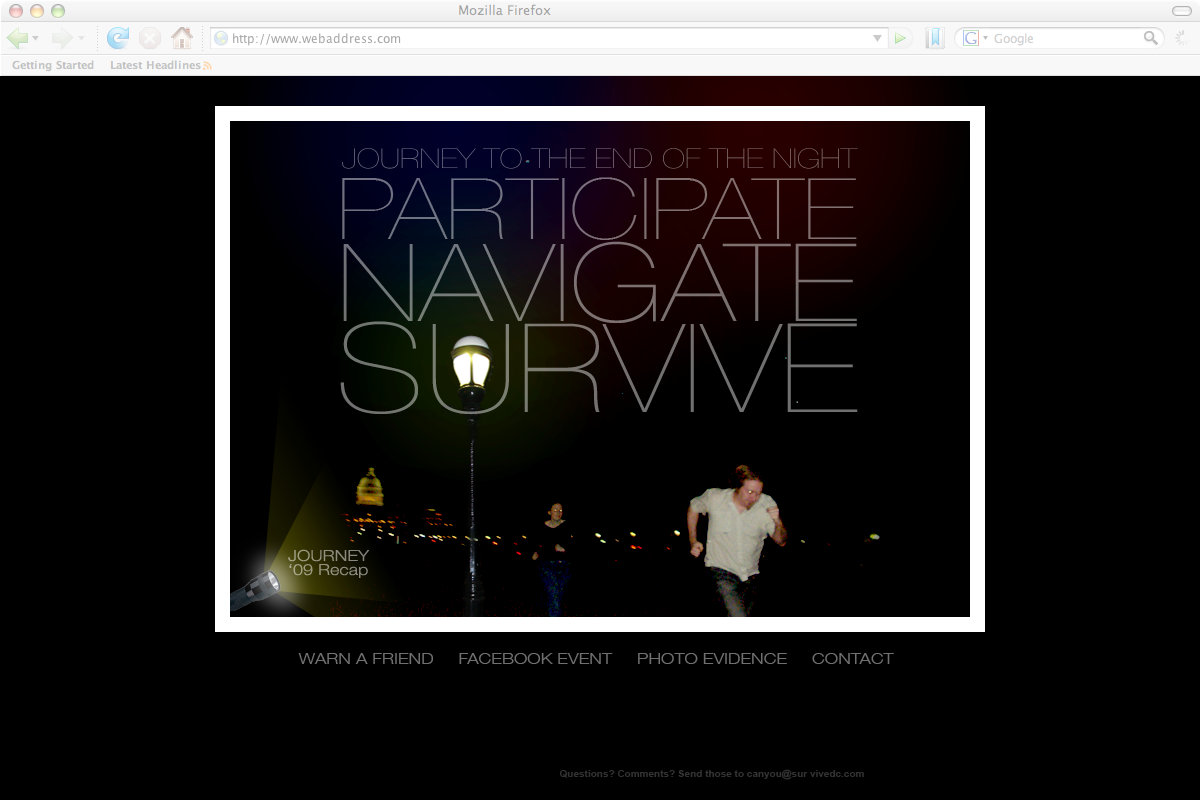
<style>
.page{position:relative;width:1200px;height:800px;background:#000000}
.page>*{position:absolute;margin:0}
.t1{font:27.2px "HelveticaNeue-UltraLight";text-transform:uppercase;scale:1.18 1}
.t2{font:85px/100px "HelveticaNeue-UltraLight";color:#777070;scale:1.18 1}
.t3{font:108px/82px "HelveticaNeue-UltraLight";color:#777070;scale:1.18 1}
.t4{font:123.2px/91px "HelveticaNeue-UltraLight";color:#777070;scale:1.18 1}
.t5{font:15.3px/14px "HelveticaNeue-Light";color:#8f8e80;scale:1.18 1}
.t6{font:15.3px/12px "HelveticaNeue-Light";color:#8f8e80;scale:1.18 1}
.t7{font:15.3px "HelveticaNeue-Light";color:#707070;scale:1.18 1}
.t8{font:10px "Arial-BoldMT";color:#333333}
</style>
<div class="page">
<p class="t1" style="left:342px;top:148px;width:516px;height:21px">Journey To The End Of The Night</p>
<p class="t1" style="left:342px;top:148px;width:516px;height:21px">Journey To The End Of The Night</p>
<p class="t2" style="left:340px;top:177px;width:518px;height:238px;text-align:center">PARTICIPATE<br><span class="t3">NAVIGATE<br></span><span class="t4">SURVIVE</span></p>
<p class="t2" style="left:340px;top:177px;width:518px;height:238px;text-align:center">PARTICIPATE<br><span class="t3">NAVIGATE<br></span><span class="t4">SURVIVE</span></p>
<p class="t5" style="left:288px;top:549px;width:82px;height:29px"><span class="t6">JOURNEY<br></span>‘09 Recap</p>
<p class="t7" style="left:298px;top:653px;width:596px;height:11px">WARN A FRIEND     FACEBOOK EVENT     PHOTO EVIDENCE     CONTACT</p>
<p class="t7" style="left:298px;top:653px;width:596px;height:11px">WARN A FRIEND     FACEBOOK EVENT     PHOTO EVIDENCE     CONTACT</p>
<p class="t8" style="left:559px;top:769px;width:305px;height:11px">Questions? Comments? Send those to canyou@sur vivedc.com</p>
</div>
